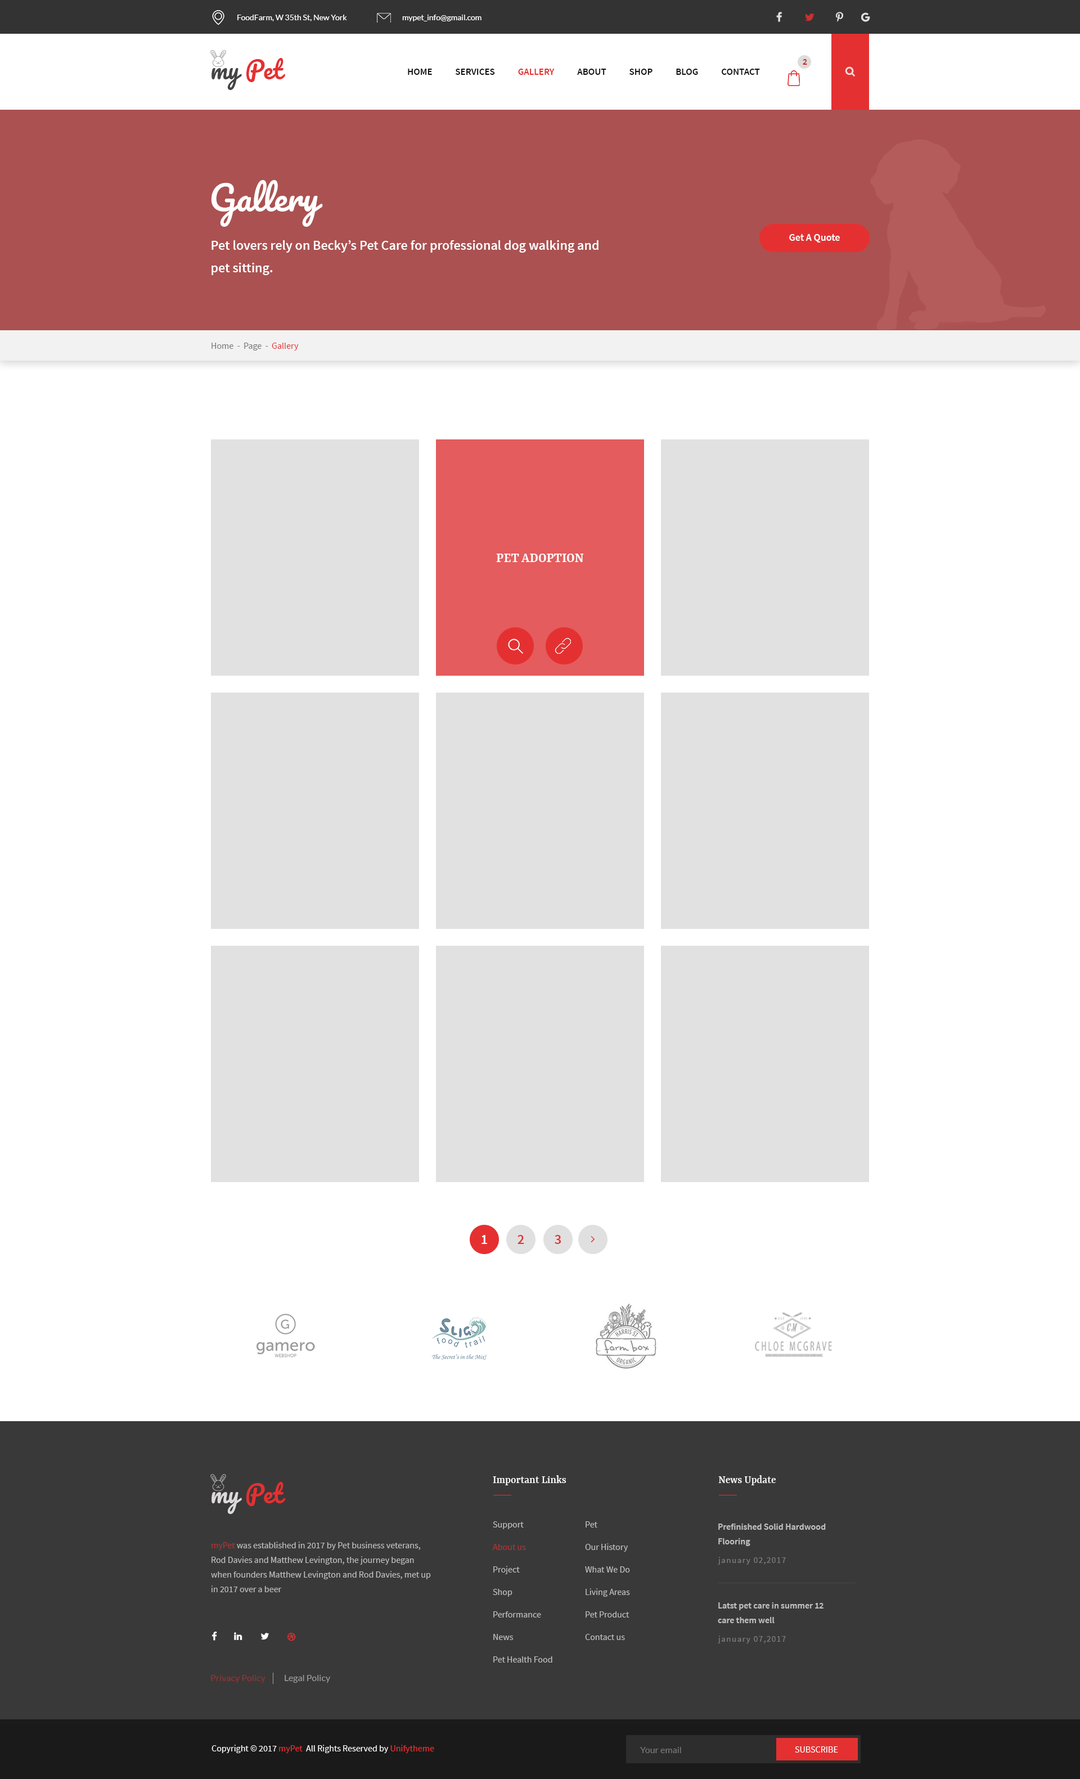
<style>
.page{position:relative;width:1080px;height:1779px;background:#ffffff}
.page>*{position:absolute;margin:0}
.t1{font:7.9px "Lato-Regular";color:#ffffff}
.t2{font:23.6px "Pacifico-Regular";color:#e53031}
.t3{font:23.6px "Pacifico-Regular";color:#454444}
.t4{font:9px "SourceSansPro-SemiBold";color:#d12526;text-transform:uppercase}
.t5{font:9.6px "SourceSansPro-SemiBold";color:#121212;text-transform:uppercase}
.t6{font:9.6px "SourceSansPro-SemiBold";color:#e53031;text-transform:uppercase}
.t7{font:33.8px "Pacifico-Regular";color:#ffffff}
.t8{font:13.5px/22.5px "SourceSansPro-SemiBold";color:#ffffff}
.t9{font:10.1px "SourceSansPro-SemiBold";color:#fffefe}
.t10{font:9px "SourceSansPro-Regular";color:#767575}
.t11{font:9px "SourceSansPro-Regular";color:#e53031}
.t12{font:14.1px "Yrsa-SemiBold";color:#ffffff}
.t13{font:14.1px "SourceSansPro-SemiBold";color:#ffffff}
.t14{font:14.1px "SourceSansPro-SemiBold";color:#e53031}
.t15{font:23.6px "Pacifico-Regular";color:#dcdada}
.t16{font:11.2px "Yrsa-Medium";color:#ffffff}
.t17{font:9px/22.5px "SourceSansPro-Regular";color:#c0c0c0}
.t18{font:9px/14.6px "SourceSansPro-SemiBold";color:#c0c0c0}
.t19{font:9px/14.6px "SourceSansPro-Regular";color:#c0c0c0}
.t20{font:8.4px "SourceSansPro-Regular";letter-spacing:0.1em;color:#7d7d7d}
.t21{font:9px "Lato-Regular";color:#8e3536}
.t22{font:9px "Lato-Regular";color:#9c9b9b}
.t23{font:9px "SourceSansPro-Regular";color:#fefefe}
.t24{font:9px "Lato-Regular";color:#777777}
.t25{font:9px "SourceSansPro-Regular";color:#ffffff;text-transform:uppercase}
</style>
<div class="page">
<p class="t1" style="left:237px;top:15px;width:110px;height:6px">FoodFarm, W 35th St, New York</p>
<p class="t1" style="left:402px;top:15px;width:80px;height:6px">mypet_info@gmail.com</p>
<p class="t2" style="left:212px;top:58px;width:73px;height:32px"><span class="t3">my </span>Pet</p>
<p class="t4" style="left:803px;top:59px;width:4px;height:6px">2</p>
<p class="t5" style="left:408px;top:69px;width:352px;height:6px">Home            Services            <span class="t6">Gallery            </span>About            Shop            Blog            Contact</p>
<p class="t7" style="left:211px;top:180px;width:112px;height:47px">Gallery</p>
<p class="t8" style="left:212px;top:240px;width:386px;height:35px">Pet lovers rely on Becky’s Pet Care for professional dog walking and pet sitting.</p>
<p class="t9" style="left:789px;top:234px;width:51px;height:8px">Get A Quote</p>
<p class="t10" style="left:212px;top:343px;width:87px;height:7px">Home  -  Page  - <span class="t11"> Gallery</span></p>
<p class="t12" style="left:496px;top:554px;width:88px;height:8px">PET ADOPTION</p>
<p class="t13" style="left:482px;top:1235px;width:5px;height:9px">1</p>
<p class="t14" style="left:518px;top:1235px;width:6px;height:9px">2</p>
<p class="t14" style="left:555px;top:1235px;width:6px;height:9px">3</p>
<p class="t2" style="left:212px;top:1482px;width:73px;height:32px"><span class="t15">my </span>Pet</p>
<p class="t16" style="left:493px;top:1475px;width:73px;height:10px">Important Links</p>
<p class="t16" style="left:718px;top:1475px;width:58px;height:10px">News Update</p>
<p class="t17" style="left:493px;top:1521px;width:59px;height:141px">Support<br>About us <br>Project<br>Shop<br>Performance<br>News<br>Pet Health Food</p>
<p class="t17" style="left:585px;top:1521px;width:45px;height:119px">Pet<br>Our History<br>What We Do<br>Living Areas<br>Pet Product<br>Contact us</p>
<p class="t18" style="left:718px;top:1523px;width:108px;height:23px">Prefinished Solid Hardwood <br>Flooring</p>
<p class="t19" style="left:211px;top:1541px;width:220px;height:51px">myPet was established in 2017 by Pet business veterans, Rod Davies and Matthew Levington, the journey began when founders Matthew Levington and Rod Davies, met up in 2017 over a beer</p>
<p class="t20" style="left:718px;top:1556px;width:68px;height:8px">january 02,2017</p>
<p class="t18" style="left:718px;top:1602px;width:106px;height:21px">Latst pet care in summer 12<br>care them well</p>
<p class="t20" style="left:718px;top:1635px;width:68px;height:8px">january 07,2017</p>
<p class="t21" style="left:211px;top:1675px;width:55px;height:7px">Privacy Policy</p>
<p class="t22" style="left:285px;top:1675px;width:45px;height:7px">Legal Policy</p>
<p class="t23" style="left:212px;top:1744px;width:222px;height:9px">Copyright © 2017 <span class="t11">myPet </span> All Rights Reserved by <span class="t11">Unifytheme</span></p>
<p class="t24" style="left:640px;top:1747px;width:41px;height:6px">Your email</p>
<p class="t25" style="left:795px;top:1746px;width:43px;height:6px">Subscribe</p>
</div>
